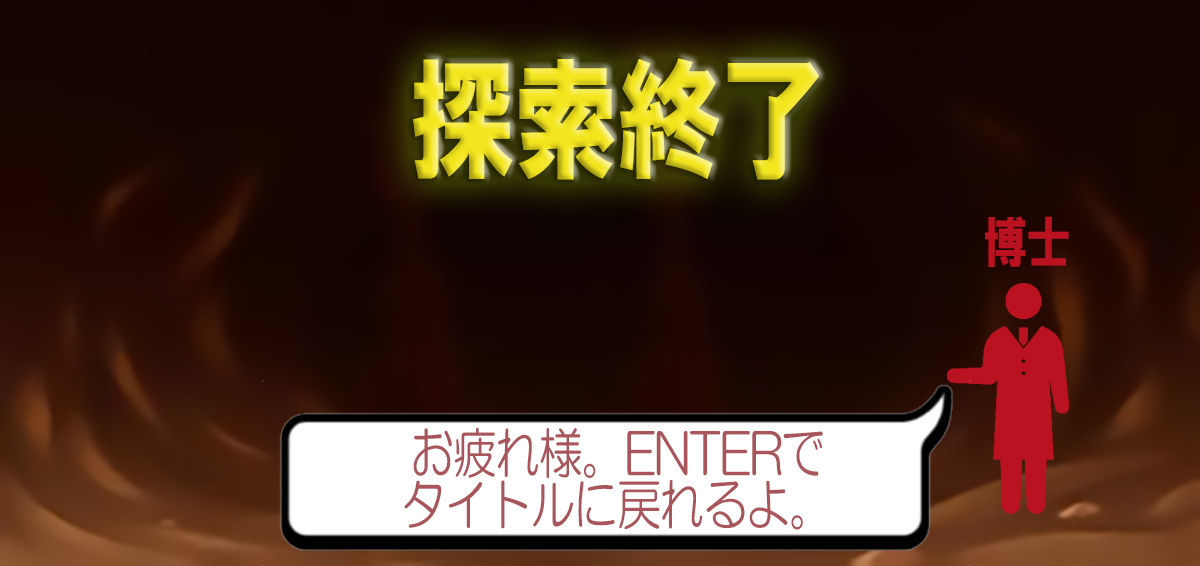
<style>
.page{position:relative;width:1200px;height:566px}
.page>*{position:absolute;margin:0}
.t1{font:132.3px "HGSoeiKakugothicUB";letter-spacing:-0.025em;font-variant:small-caps;scale:0.8 1}
.t2{font:55.1px "HGSoeiKakugothicUB";letter-spacing:-0.025em;color:#ba1221;font-variant:small-caps;scale:0.8 1}
.t3{font:55.1px/51.5px "HGMaruGothicMPRO";letter-spacing:-0.025em;color:#a8565b;font-variant:small-caps;scale:0.8 1}
</style>
<div class="page">
<p class="t1" style="left:413px;top:58px;width:406px;height:122px">探索終了</p>
<p class="t2" style="left:985px;top:216px;width:84px;height:51px">博士</p>
<p class="t3" style="left:404px;top:427px;width:419px;height:103px;text-align:center">お疲れ様。ENTERで<br>タイトルに戻れるよ。</p>
</div>
